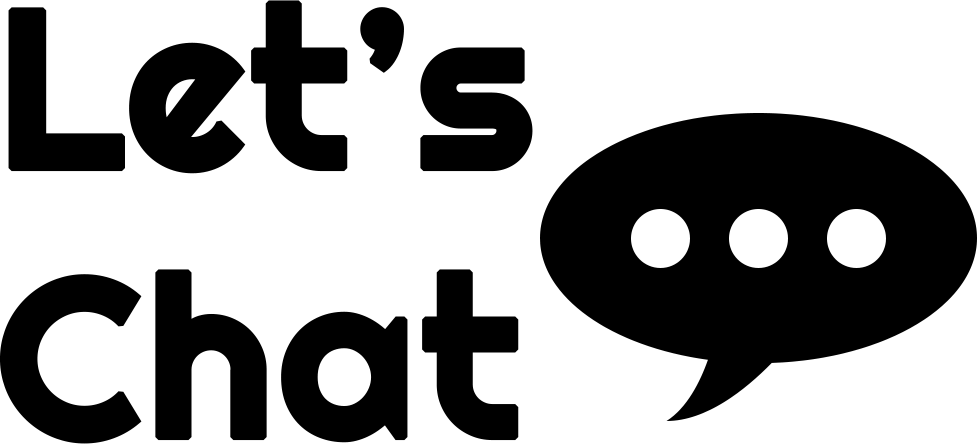
<style>
.page{position:relative;width:977px;height:444px;background:#ffffff}
.page>*{position:absolute;margin:0}
.t1{font:224.5px "Righteous-Regular";color:#000000;font-weight:bold}
</style>
<div class="page">
<p class="t1" style="left:0px;top:0px;width:533px;height:444px;text-align:right">Let’s<br>Chat</p>
</div>
